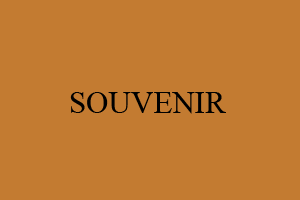
<style>
.page{position:relative;width:300px;height:200px;background:#c37b31}
.page>*{position:absolute;margin:0}
.t1{font:31px "TimesNewRomanPSMT";color:#000000}
</style>
<div class="page">
<p class="t1" style="left:70px;top:92px;width:156px;height:22px">SOUVENIR</p>
</div>
